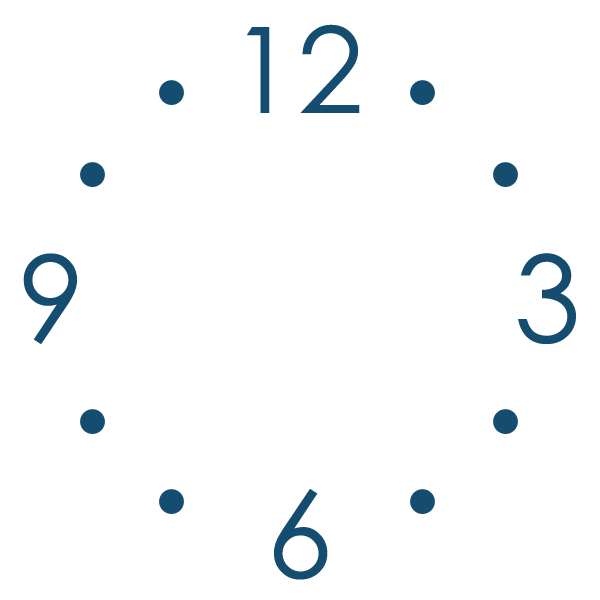
<style>
.page{position:relative;width:600px;height:600px;background:#ffffff}
.page>*{position:absolute;margin:0}
.t1{font:120px "STHeitiTC-Light";color:#154d70}
</style>
<div class="page">
<p class="t1" style="left:247px;top:24px;width:113px;height:89px">12</p>
<p class="t1" style="left:23px;top:253px;width:54px;height:91px">9</p>
<p class="t1" style="left:518px;top:253px;width:58px;height:92px">3</p>
<p class="t1" style="left:274px;top:489px;width:54px;height:91px">6</p>
</div>
